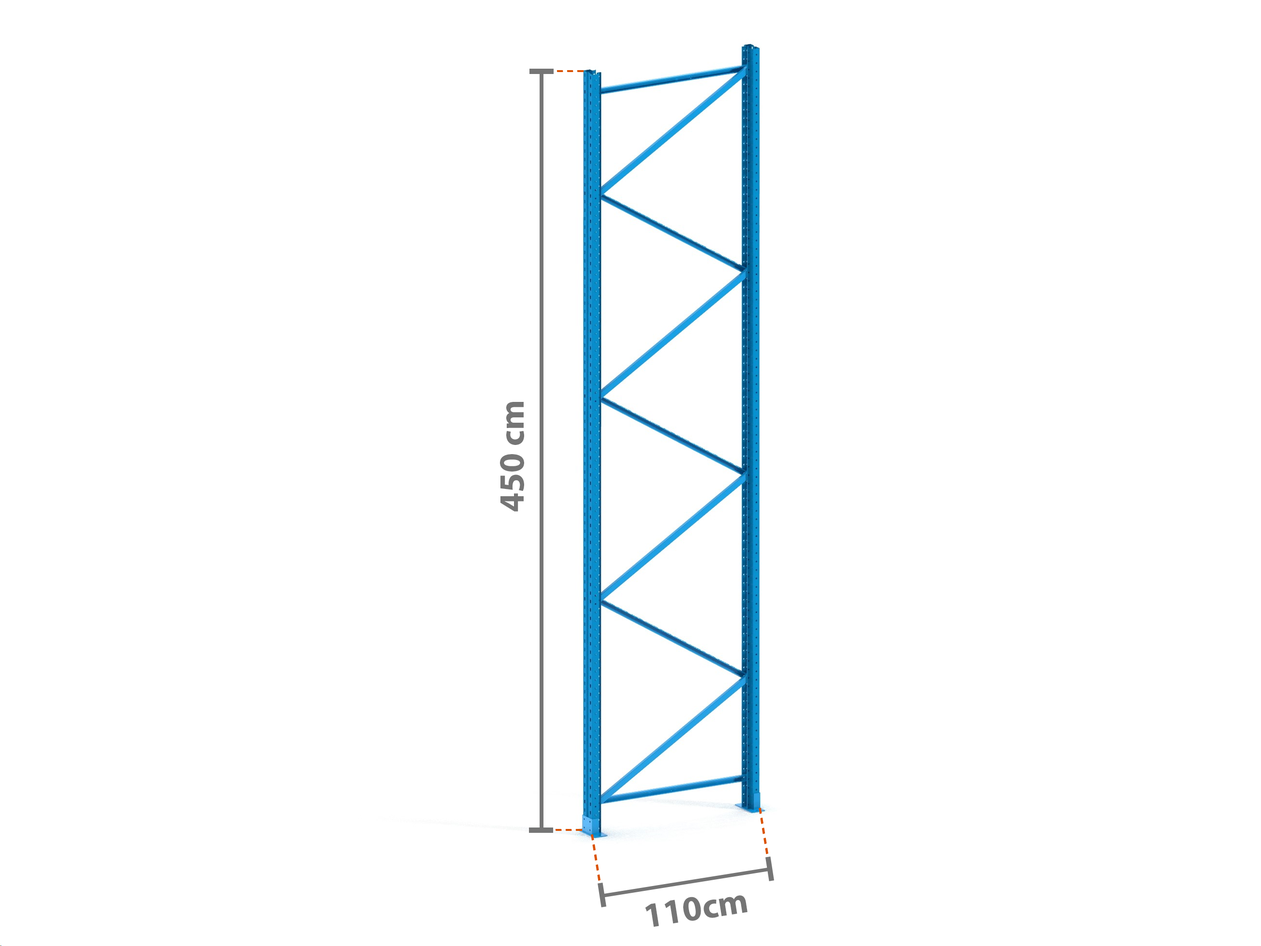
<style>
.page{position:relative;width:1261px;height:946px;background:#ffffff}
.page>*{position:absolute;margin:0}
.t1{font:35.5px "MyriadPro-Bold";color:#757575}
</style>
<div class="page">
<p class="t1" style="left:500px;top:402px;width:24px;height:110px;rotate:-90deg">450 cm</p>
<p class="t1" style="left:645px;top:895px;width:102px;height:32px;rotate:-9deg">110cm</p>
</div>
